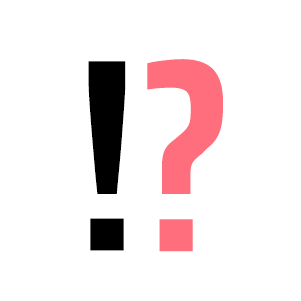
<style>
.page{position:relative;width:301px;height:301px;background:#ffffff}
.page>*{position:absolute;margin:0}
.t1{font:274.7px "SairaExtraCondensed-Bold";letter-spacing:0.01em;color:#000000}
.t2{font:274.7px "SairaExtraCondensed-Bold";letter-spacing:0.01em;color:#ff6e7c}
</style>
<div class="page">
<p class="t1" style="left:88px;top:59px;width:135px;height:193px">!<span class="t2">?</span></p>
</div>
